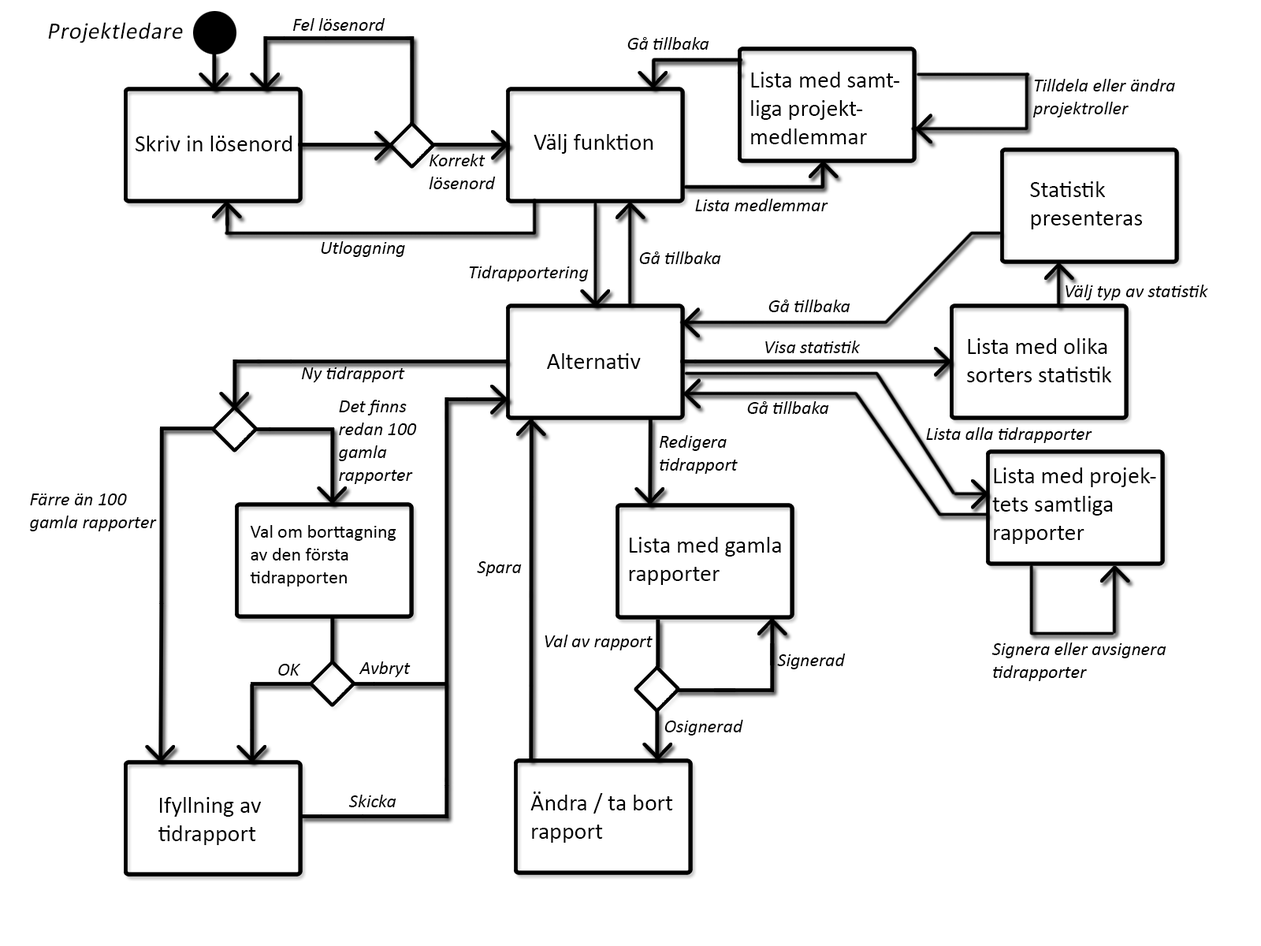
<style>
.page{position:relative;width:1261px;height:946px;background:#ffffff}
.page>*{position:absolute;margin:0}
.t1{font:23.6px "Calibri";letter-spacing:0.02em;color:#000000;font-style:italic}
.t2{font:18.9px "Calibri-Italic";color:#000000}
.t3{font:23.6px "Calibri";color:#000000}
.t4{font:18.9px "Calibri";color:#000000}
</style>
<div class="page">
<p class="t1" style="left:48px;top:22px;width:135px;height:21px">Projektledare</p>
<p class="t2" style="left:292px;top:18px;width:93px;height:13px">Fel lösenord</p>
<p class="t2" style="left:627px;top:37px;width:82px;height:13px">Gå tillbaka</p>
<p class="t3" style="left:751px;top:72px;width:149px;height:72px;text-align:right">Lista med samtliga projekt-medlemmar</p>
<p class="t2" style="left:1032px;top:79px;width:143px;height:38px;text-align:right">Tilldela eller ändra projektroller</p>
<p class="t3" style="left:136px;top:136px;width:156px;height:15px">Skriv in lösenord</p>
<p class="t3" style="left:534px;top:134px;width:119px;height:20px">Välj funktion</p>
<p class="t2" style="left:429px;top:154px;width:67px;height:35px;text-align:right">Korrekt <br>lösenord</p>
<p class="t3" style="left:1030px;top:181px;width:112px;height:48px;text-align:right">Statistik  <br>presenteras</p>
<p class="t2" style="left:695px;top:199px;width:133px;height:12px">Lista medlemmar</p>
<p class="t2" style="left:321px;top:241px;width:84px;height:16px">Utloggning</p>
<p class="t2" style="left:639px;top:251px;width:82px;height:13px">Gå tillbaka</p>
<p class="t2" style="left:469px;top:266px;width:120px;height:15px">Tidrapportering</p>
<p class="t2" style="left:1065px;top:284px;width:143px;height:16px">Välj typ av statistik</p>
<p class="t2" style="left:768px;top:299px;width:82px;height:13px">Gå tillbaka</p>
<p class="t2" style="left:765px;top:340px;width:96px;height:13px">Visa statistik</p>
<p class="t3" style="left:967px;top:338px;width:144px;height:44px;text-align:right">Lista med olika sorters statistik</p>
<p class="t3" style="left:547px;top:353px;width:94px;height:16px">Alternativ</p>
<p class="t2" style="left:301px;top:366px;width:104px;height:16px">Ny tidrapport</p>
<p class="t2" style="left:339px;top:400px;width:78px;height:84px;text-align:right">Det finns redan 100 gamla <br>rapporter</p>
<p class="t2" style="left:747px;top:401px;width:82px;height:13px">Gå tillbaka</p>
<p class="t2" style="left:659px;top:435px;width:79px;height:39px;text-align:right">Redigera<br>tidrapport</p>
<p class="t2" style="left:926px;top:427px;width:166px;height:16px">Lista alla tidrapporter</p>
<p class="t3" style="left:992px;top:467px;width:164px;height:77px;text-align:right">Lista med projektets samtliga<br>rapporter</p>
<p class="t2" style="left:30px;top:493px;width:127px;height:38px;text-align:right">Färre än 100 <br>gamla rapporter</p>
<p class="t4" style="left:250px;top:525px;width:146px;height:61px;text-align:right">Val om borttagning <br>av den första <br>tidrapporten</p>
<p class="t3" style="left:629px;top:537px;width:152px;height:48px;text-align:right">Lista med gamla rapporter</p>
<p class="t2" style="left:477px;top:561px;width:45px;height:15px">Spara</p>
<p class="t2" style="left:545px;top:634px;width:108px;height:16px">Val av rapport</p>
<p class="t2" style="left:777px;top:653px;width:69px;height:16px">Signerad</p>
<p class="t2" style="left:991px;top:642px;width:175px;height:39px;text-align:right">Signera eller avsignera tidrapporter</p>
<p class="t2" style="left:278px;top:664px;width:22px;height:11px">OK</p>
<p class="t2" style="left:359px;top:661px;width:52px;height:16px">Avbryt</p>
<p class="t2" style="left:664px;top:720px;width:79px;height:15px">Osignerad</p>
<p class="t3" style="left:158px;top:797px;width:103px;height:48px;text-align:right">Ifyllning av tidrapport</p>
<p class="t2" style="left:348px;top:794px;width:48px;height:13px">Skicka</p>
<p class="t3" style="left:530px;top:791px;width:143px;height:51px;text-align:right">Ändra / ta bort rapport</p>
</div>
